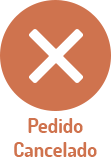
<style>
.page{position:relative;width:111px;height:162px;background:#cf734e}
.page>*{position:absolute;margin:0}
.t1{font:20px/24px "Dosis-Bold";color:#cf734e}
</style>
<div class="page">
<p class="t1" style="left:14px;top:118px;width:83px;height:39px;text-align:center">Pedido<br>Cancelado</p>
</div>
